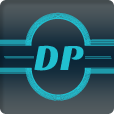
<style>
.page{position:relative;width:114px;height:114px}
.page>*{position:absolute;margin:0}
.t1{font:36px "SansitaOne";color:#21bfd0}
</style>
<div class="page">
<p class="t1" style="left:34px;top:45px;width:50px;height:26px">DP</p>
</div>
